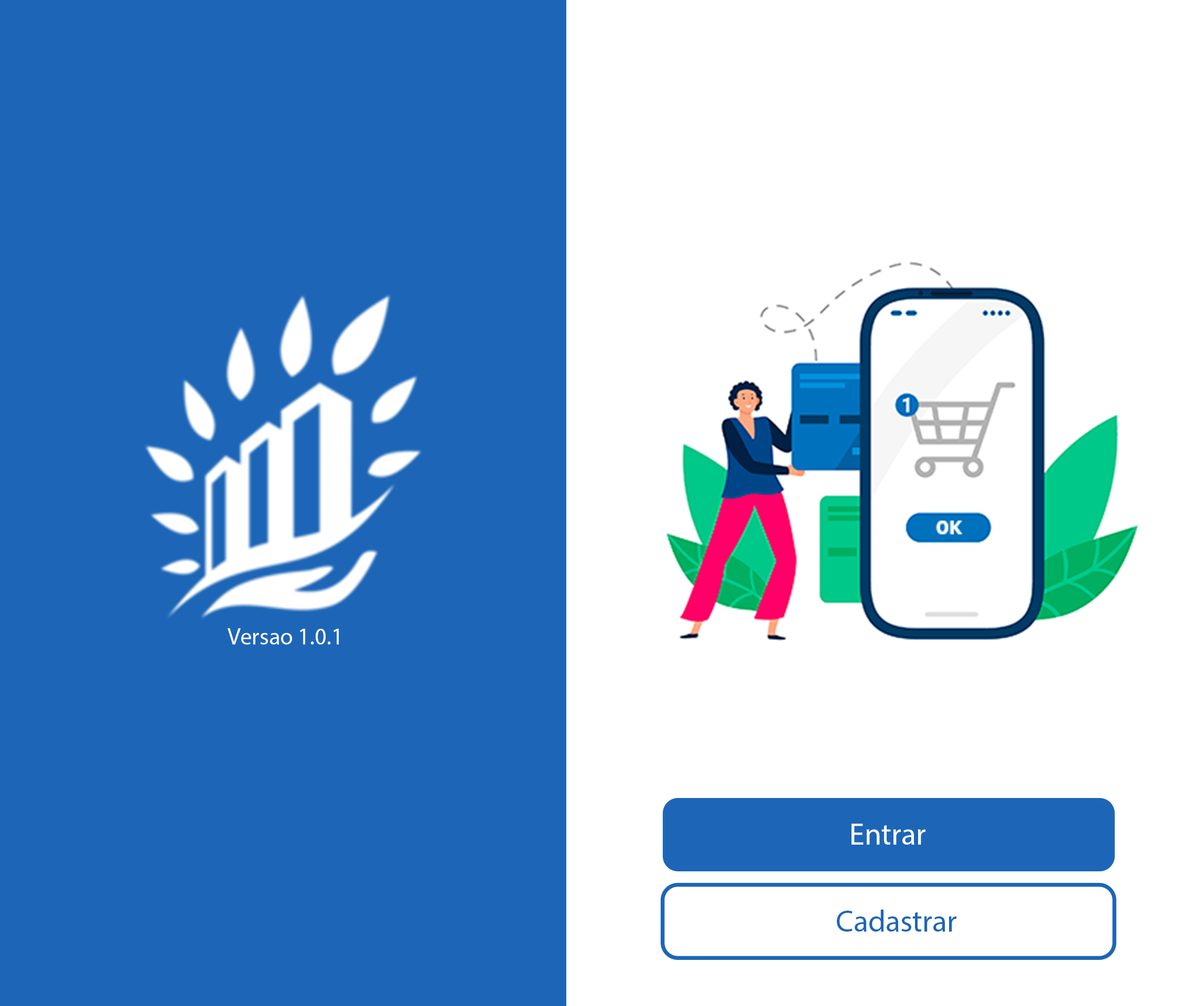
<style>
.page{position:relative;width:1185px;height:1006px;background:#1d66b7}
.page>*{position:absolute;margin:0}
.t1{font:23.4px "MyriadPro-Regular";color:#ffffff}
.t2{font:30.6px "MyriadPro-Regular";color:#ffffff}
.t3{font:30.6px "MyriadPro-Regular";color:#1d66b7}
</style>
<div class="page">
<p class="t1" style="left:228px;top:629px;width:111px;height:16px">Versao 1.0.1</p>
<p class="t2" style="left:851px;top:824px;width:74px;height:21px">Entrar</p>
<p class="t3" style="left:837px;top:910px;width:119px;height:22px">Cadastrar</p>
</div>
